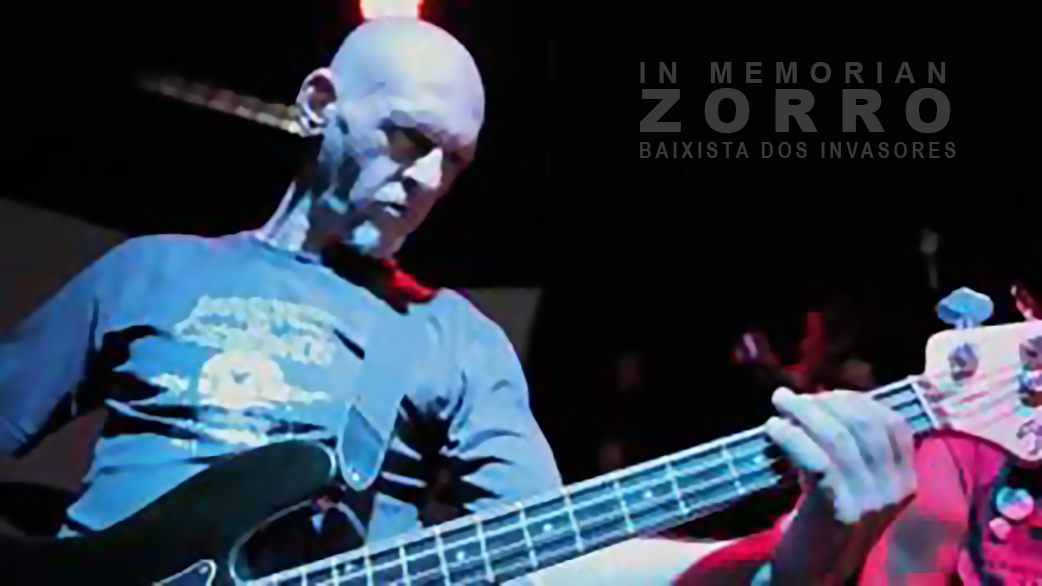
<style>
.page{position:relative;width:1042px;height:586px}
.page>*{position:absolute;margin:0}
.t1{font:21.9px "ArialNarrow-Bold";letter-spacing:0.18em;color:#3b3937}
.t2{font:29px/48.4px "Arial-BoldMT";letter-spacing:0.38em;color:#3b3937}
.t3{font:60.5px/48.4px "Arial-Black";letter-spacing:0.32em;color:#3b3937}
</style>
<div class="page">
<p class="t1" style="left:640px;top:62px;width:316px;height:96px"><span class="t2">IN MEMORIAN<br></span><span class="t3">ZORRO<br></span>BAIXISTA DOS INVASORES</p>
</div>
